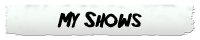
<style>
.page{position:relative;width:200px;height:40px;background:#ffffff}
.page>*{position:absolute;margin:0}
.t1{font:19.2px "Friday13";color:#000000}
</style>
<div class="page">
<p class="t1" style="left:57px;top:11px;width:85px;height:17px">My Shows</p>
</div>
